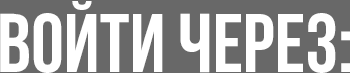
<style>
.page{position:relative;width:350px;height:73px;background:#686868}
.page>*{position:absolute;margin:0}
.t1{font:83.3px "BebasNeueBold";color:#ffffff}
</style>
<div class="page">
<p class="t1" style="left:0px;top:1px;width:351px;height:72px">войти через:</p>
</div>
